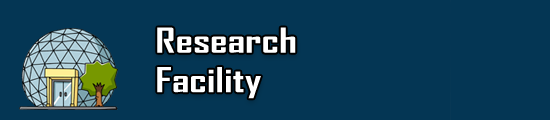
<style>
.page{position:relative;width:550px;height:120px;background:#043654}
.page>*{position:absolute;margin:0}
.t1{font:32.9px "AgencyFB-Bold";color:#ffffff;scale:1.33 1}
</style>
<div class="page">
<p class="t1" style="left:157px;top:27px;width:139px;height:72px">Research <br>Facility</p>
</div>
